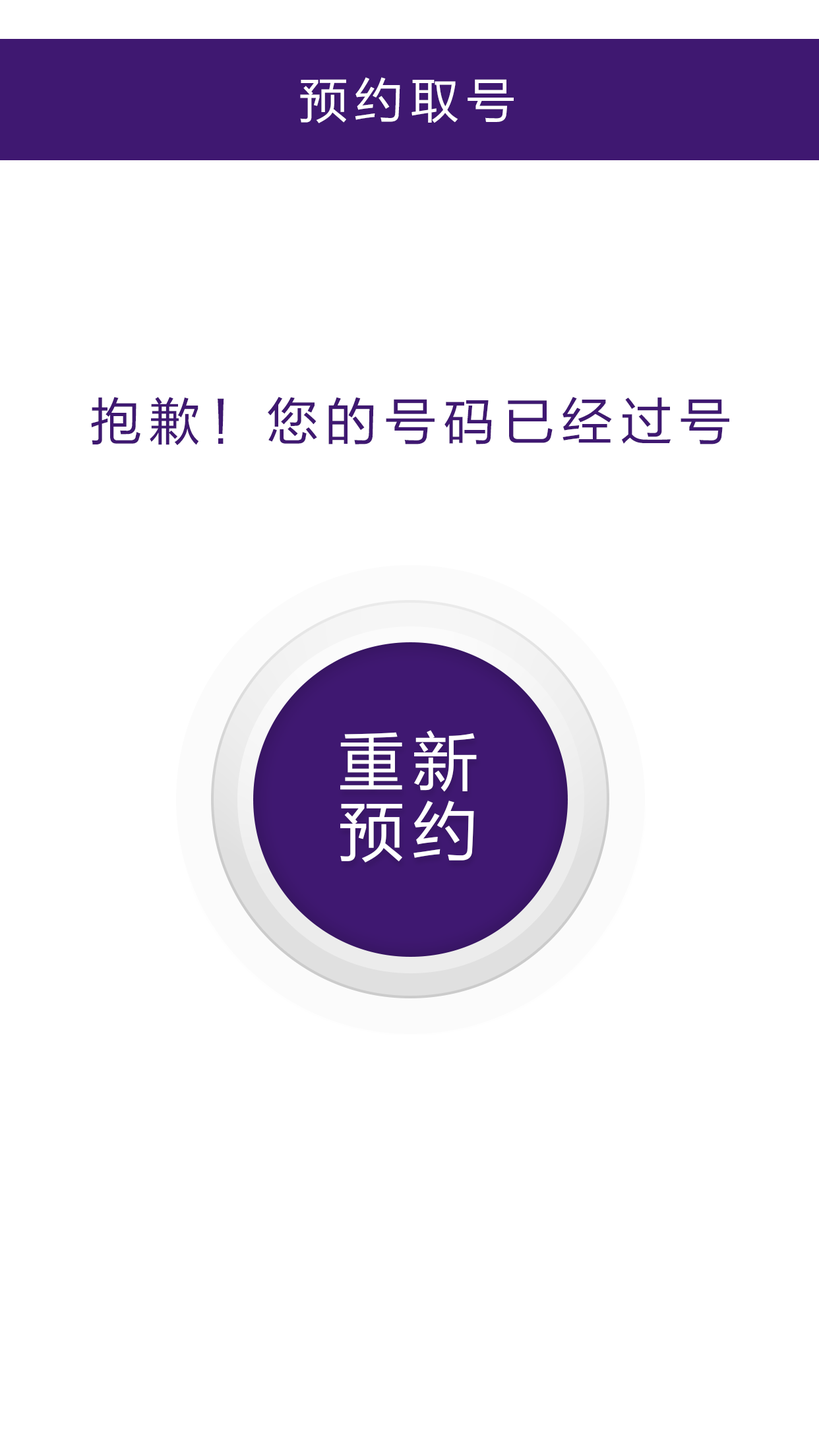
<style>
.page{position:relative;width:819px;height:1456px;background:#ffffff}
.page>*{position:absolute;margin:0}
.t1{font:49px "FZLTHJW--GB1-0";letter-spacing:0.14em;color:#ffffff}
.t2{font:51.7px "FZLTHJW--GB1-0";letter-spacing:0.14em;color:#3f1871}
.t3{font:65.9px/70.6px "FZLTHJW--GB1-0";letter-spacing:0.12em;color:#ffffff}
</style>
<div class="page">
<p class="t1" style="left:300px;top:77px;width:214px;height:46px">预约取号</p>
<p class="t2" style="left:91px;top:396px;width:638px;height:49px">抱歉！您的号码已经过号</p>
<p class="t3" style="left:340px;top:730px;width:137px;height:133px;text-align:center">重新<br>预约</p>
</div>
